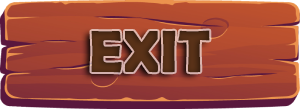
<style>
.page{position:relative;width:300px;height:109px}
.page>*{position:absolute;margin:0}
.t1{font:60px "BerlinSansFBDemi-Bold";color:#5a3218}
</style>
<div class="page">
<p class="t1" style="left:91px;top:30px;width:119px;height:43px">EXIT</p>
</div>
